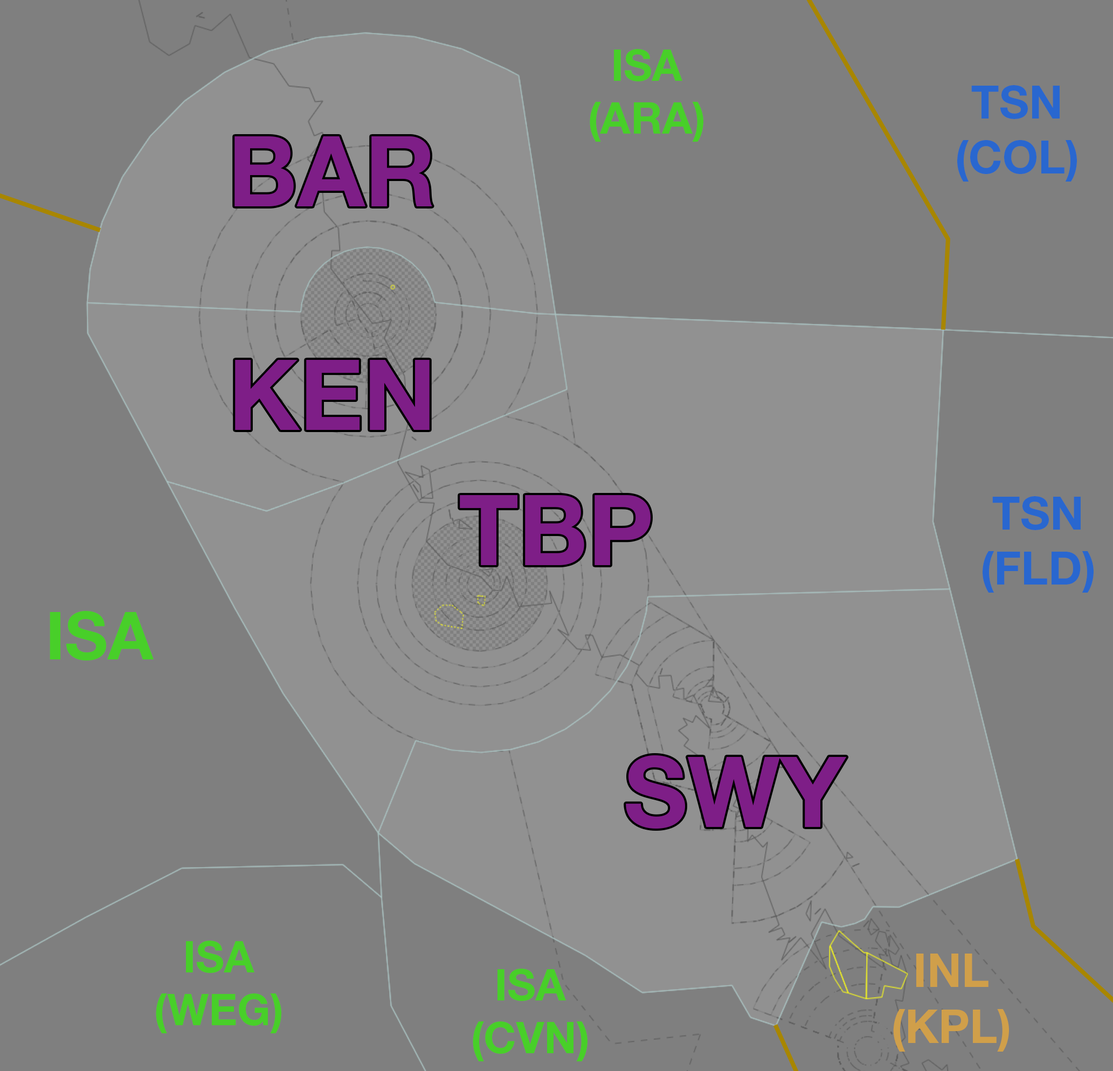
<style>
.page{position:relative;width:1113px;height:1071px;background:#7f7f7f}
.page>*{position:absolute;margin:0}
.t1{font:44px "HelveticaNeueLTStd-Bd";color:#48cf29}
.t2{font:45.8px "HelveticaNeueLTStd-Bd";color:#2967cf}
.t3{font:98.3px "HelveticaNeueLTStd-Bd";color:#7e1e87}
.t4{font:66.4px "HelveticaNeueLTStd-Bd";color:#48cf29}
.t5{font:46.7px "HelveticaNeueLTStd-Bd";color:#d09f4a}
</style>
<div class="page">
<p class="t1" style="left:590px;top:49px;width:113px;height:93px;text-align:center">ISA<br>(ARA)</p>
<p class="t2" style="left:957px;top:85px;width:120px;height:97px;text-align:center">TSN<br>(COL)</p>
<p class="t3" style="left:234px;top:136px;width:198px;height:70px">BAR</p>
<p class="t3" style="left:235px;top:360px;width:195px;height:70px">KEN</p>
<p class="t3" style="left:460px;top:495px;width:191px;height:70px">TBP</p>
<p class="t2" style="left:983px;top:496px;width:111px;height:97px;text-align:center">TSN<br>(FLD)</p>
<p class="t4" style="left:50px;top:611px;width:104px;height:50px">ISA</p>
<p class="t3" style="left:626px;top:756px;width:221px;height:73px">SWY</p>
<p class="t1" style="left:156px;top:941px;width:125px;height:93px;text-align:center">ISA<br>(WEG)</p>
<p class="t5" style="left:893px;top:954px;width:116px;height:98px;text-align:center">INL<br>(KPL)</p>
<p class="t1" style="left:473px;top:969px;width:114px;height:93px;text-align:center">ISA<br>(CVN)</p>
</div>
